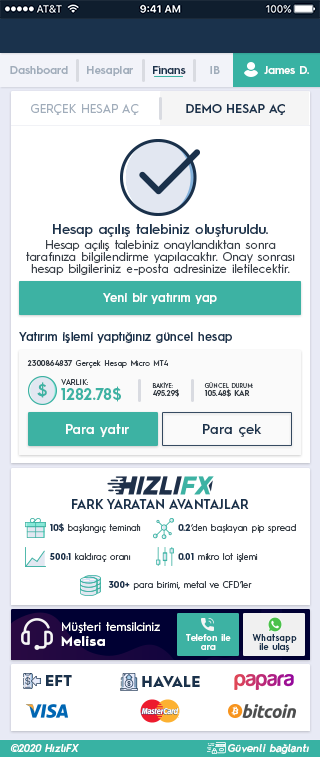
<style>
.page{position:relative;width:320px;height:757px;background:#ffffff}
.page>*{position:absolute;margin:0}
.t1{font:11.1px "HurmeGeometricSans3-SemiBold";color:#a1adbb}
.t2{font:11.1px "HurmeGeometricSans3-SemiBold";color:#1a324c}
.t3{font:11.1px "HurmeGeometricSans3-SemiBold";color:#fefefe}
.t4{font:11.9px "HurmeGeometricSans1-Regular";letter-spacing:0.01em;color:#a1adbb}
.t5{font:11.9px "HurmeGeometricSans1-SemiBold";letter-spacing:0.01em;color:#1a324c}
.t6{font:13.6px "HurmeGeometricSans3-SemiBold";letter-spacing:0.01em;color:#1a324c}
.t7{font:11.9px/11.9px "HurmeGeometricSans1-Regular";letter-spacing:0.01em;color:#3a4149}
.t8{font:11.9px "HurmeGeometricSans3-SemiBold";letter-spacing:0.025em;color:#ffffff}
.t9{font:11.9px "HurmeGeometricSans3-SemiBold";letter-spacing:0.01em;color:#1a324c}
.t10{font:7.7px "HurmeGeometricSans1-Regular";letter-spacing:0.025em;color:#3a4149}
.t11{font:7.7px "HurmeGeometricSans1-SemiBold";letter-spacing:0.025em;color:#3a4149}
.t12{font:16.8px "HurmeGeometricSans2-SemiBold";letter-spacing:0.01em;color:#3db2a3}
.t13{font:7.7px "HurmeGeometricSans1-Regular";letter-spacing:0.01em;color:#3a4149}
.t14{font:15.4px "HurmeGeometricSans1-Bold";letter-spacing:0.01em;color:#3db2a3}
.t15{font:6px/8.5px "HurmeGeometricSans1-Regular";letter-spacing:0.01em;color:#3a4149}
.t16{font:7.7px/8.5px "HurmeGeometricSans1-SemiBold";letter-spacing:0.01em;color:#3a4149}
.t17{font:13.6px "HurmeGeometricSans3-SemiBold";letter-spacing:0.01em;color:#ffffff}
.t18{font:13.6px "HurmeGeometricSans3-SemiBold";letter-spacing:0.025em;color:#1a324c}
.t19{font:12.8px "HurmeGeometricSans1-SemiBold";color:#1a324c}
.t20{font:9px "HurmeGeometricSans1-Regular";color:#3a4149}
.t21{font:9px "HurmeGeometricSans1-Bold";color:#1a324c}
.t22{font:11.9px/15.4px "HurmeGeometricSans1-Regular";letter-spacing:0.025em;color:#ffffff}
.t23{font:13.6px/15.4px "HurmeGeometricSans1-Bold";letter-spacing:0.05em;color:#ffffff}
.t24{font:8.9px/8.9px "HurmeGeometricSans3-SemiBold";letter-spacing:0.01em;color:#ffffff}
.t25{font:8.9px/8.9px "HurmeGeometricSans3-SemiBold";letter-spacing:0.01em;color:#1a324c}
.t26{font:14.5px "HurmeGeometricSans1-Black";letter-spacing:0.025em;color:#1a324c}
.t27{font:10.2px "HurmeGeometricSans2-SemiBoldObl";letter-spacing:0.025em;color:#ffffff}
</style>
<div class="page">
<p class="t1" style="left:10px;top:66px;width:58px;height:8px">Dashboard</p>
<p class="t1" style="left:87px;top:66px;width:46px;height:10px">Hesaplar</p>
<p class="t2" style="left:153px;top:66px;width:33px;height:8px">Finans</p>
<p class="t1" style="left:210px;top:66px;width:10px;height:8px">IB</p>
<p class="t3" style="left:264px;top:66px;width:45px;height:8px">James D.</p>
<p class="t4" style="left:31px;top:104px;width:108px;height:11px">GERÇEK HESAP AÇ</p>
<p class="t5" style="left:186px;top:104px;width:99px;height:11px">DEMO HESAP AÇ</p>
<p class="t6" style="left:53px;top:224px;width:215px;height:13px">Hesap açılış talebiniz oluşturuldu.</p>
<p class="t7" style="left:26px;top:240px;width:269px;height:35px;text-align:center">Hesap açılış talebiniz onaylandıktan sonra<br>tarafınıza bilgilendirme yapılacaktır. Onay sonrası<br>hesap bilgileriniz e-posta adresinize iletilecektir.</p>
<p class="t8" style="left:103px;top:293px;width:114px;height:11px">Yeni bir yatırım yap</p>
<p class="t9" style="left:19px;top:332px;width:213px;height:11px">Yatırım işlemi yaptığınız güncel hesap</p>
<p class="t10" style="left:27px;top:360px;width:141px;height:8px"><span class="t11">2300864837</span> Gerçek Hesap Micro MT4</p>
<p class="t12" style="left:37px;top:382px;width:10px;height:16px">$</p>
<p class="t13" style="left:61px;top:379px;width:27px;height:6px">VARLIK:</p>
<p class="t14" style="left:61px;top:386px;width:60px;height:16px">1282.78$</p>
<p class="t15" style="left:152px;top:382px;width:27px;height:15px">BAKİYE:<br><span class="t16">495.29$</span></p>
<p class="t15" style="left:204px;top:382px;width:49px;height:15px">GÜNCEL DURUM:<br><span class="t16">105.48$ KAR</span></p>
<p class="t17" style="left:66px;top:424px;width:63px;height:13px">Para yatır</p>
<p class="t18" style="left:203px;top:424px;width:59px;height:13px">Para çek</p>
<p class="t19" style="left:72px;top:499px;width:177px;height:10px">FARK YARATAN AVANTAJLAR</p>
<p class="t20" style="left:50px;top:523px;width:91px;height:10px"><span class="t21">10$</span> başlangıç teminatı</p>
<p class="t20" style="left:178px;top:524px;width:118px;height:9px"><span class="t21">0.2</span>‘den başlayan pip spread</p>
<p class="t20" style="left:49px;top:553px;width:82px;height:9px"><span class="t21">500:1</span> kaldıraç oranı</p>
<p class="t20" style="left:178px;top:553px;width:80px;height:9px"><span class="t21">0.01</span> mikro lot işlemi</p>
<p class="t20" style="left:108px;top:581px;width:144px;height:9px"><span class="t21">300+</span> para birimi, metal ve CFD’ler</p>
<p class="t22" style="left:61px;top:622px;width:99px;height:24px">Müşteri temsilciniz<br><span class="t23">Melisa</span></p>
<p class="t24" style="left:186px;top:634px;width:45px;height:16px;text-align:center">Telefon ile<br>ara</p>
<p class="t25" style="left:252px;top:634px;width:45px;height:18px;text-align:center">Whatsapp<br>ile ulaş</p>
<p class="t26" style="left:46px;top:675px;width:26px;height:11px">EFT</p>
<p class="t26" style="left:142px;top:676px;width:58px;height:11px">HAVALE</p>
<p class="t27" style="left:10px;top:744px;width:69px;height:8px">©2020 HızlıFX</p>
<p class="t27" style="left:228px;top:744px;width:81px;height:10px">Güvenli bağlantı</p>
</div>
